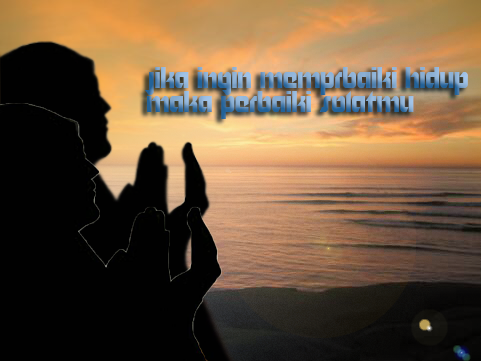
<style>
.page{position:relative;width:481px;height:361px;background:#010101}
.page>*{position:absolute;margin:0}
.t1{font:20.3px "Nordic";scale:0.8 1}
</style>
<div class="page">
<p class="t1" style="left:145px;top:67px;width:323px;height:52px">Jika ingin memprbaiki hidup<br>maka perbaiki solatmu</p>
<p class="t1" style="left:145px;top:67px;width:323px;height:52px">Jika ingin memprbaiki hidup<br>maka perbaiki solatmu</p>
</div>
